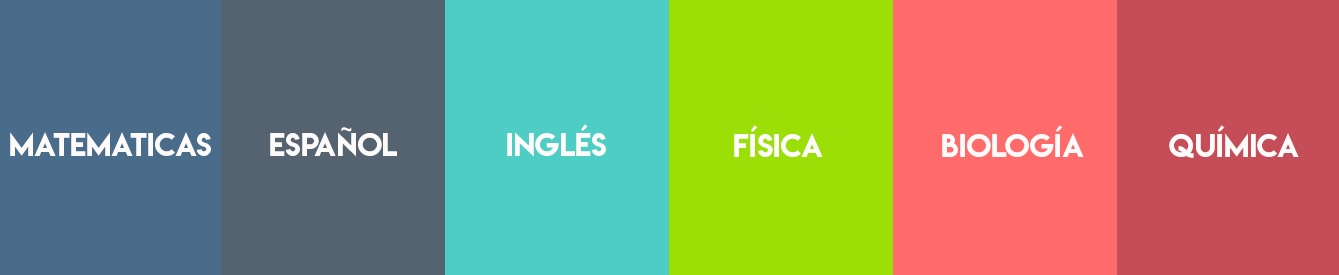
<style>
.page{position:relative;width:1339px;height:275px}
.page>*{position:absolute;margin:0}
.t1{font:29.2px "LemonMilk";color:#fdfafa}
</style>
<div class="page">
<p class="t1" style="left:507px;top:124px;width:99px;height:33px">INGLÉS</p>
<p class="t1" style="left:734px;top:125px;width:89px;height:32px">FÍSICA</p>
<p class="t1" style="left:942px;top:125px;width:142px;height:32px">BIOLOGÍA</p>
<p class="t1" style="left:1169px;top:125px;width:130px;height:33px">QUÍMICA</p>
<p class="t1" style="left:10px;top:132px;width:201px;height:24px">matematicas</p>
<p class="t1" style="left:270px;top:127px;width:127px;height:30px">ESPAÑOL</p>
</div>
